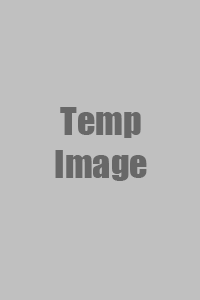
<style>
.page{position:relative;width:200px;height:300px;background:#c0c0c0}
.page>*{position:absolute;margin:0}
.t1{font:36px "Impact";color:#686868}
</style>
<div class="page">
<p class="t1" style="left:55px;top:107px;width:92px;height:74px;text-align:center">Temp<br>Image</p>
</div>
